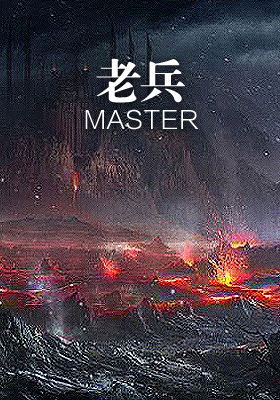
<style>
.page{position:relative;width:280px;height:400px}
.page>*{position:absolute;margin:0}
.t1{font:48px "FZDBSJW--GB1-0";letter-spacing:-0.06em;color:#ffffff}
.t2{font:24px "FZLTXHK--GBK1-0";letter-spacing:0.04em;color:#ffffff}
</style>
<div class="page">
<p class="t1" style="left:96px;top:58px;width:89px;height:45px">老兵</p>
<p class="t2" style="left:85px;top:109px;width:113px;height:21px">MASTER</p>
</div>
